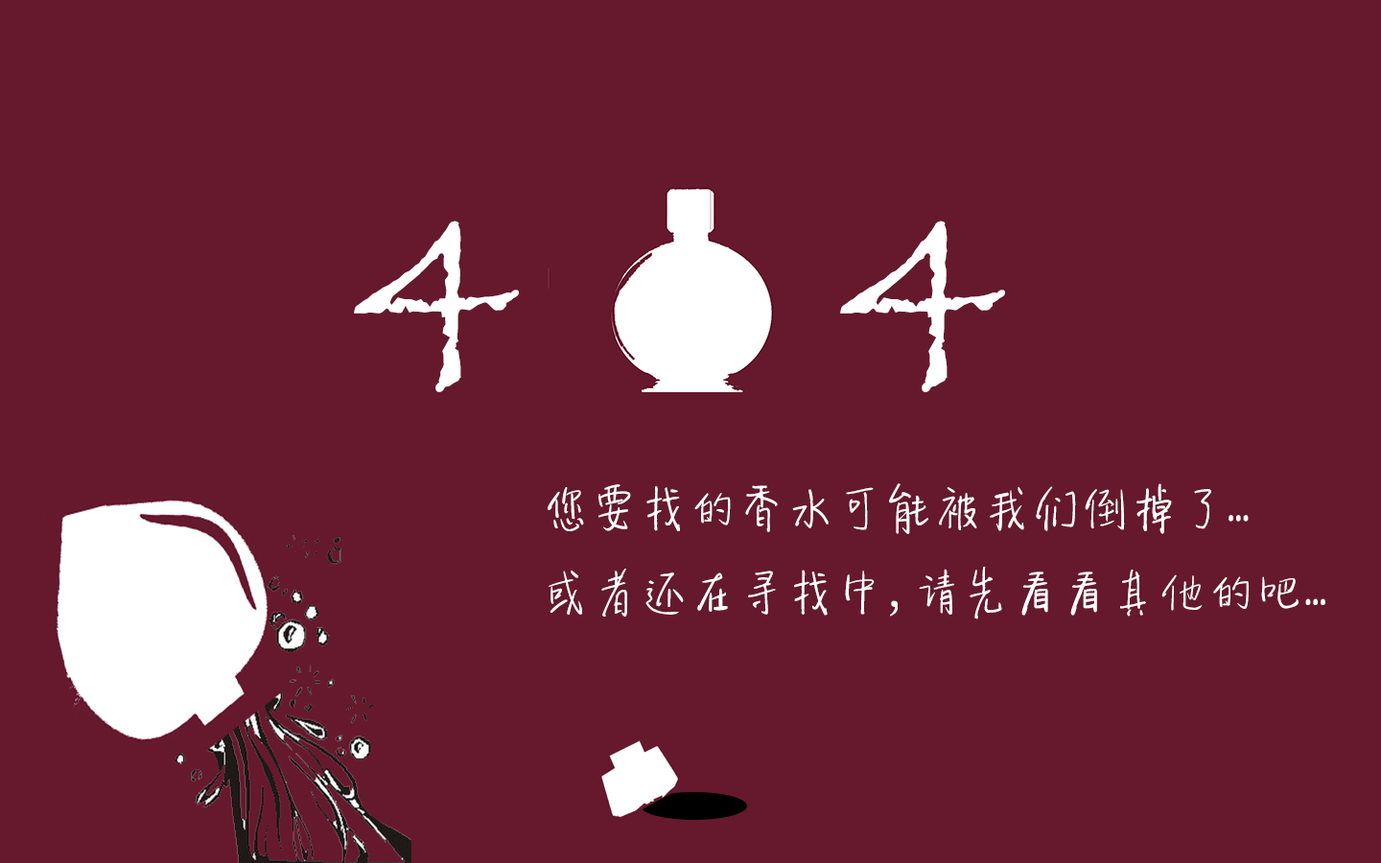
<style>
.page{position:relative;width:1381px;height:863px;background:#66192c}
.page>*{position:absolute;margin:0}
.t1{font:287.8px "Papyrus-Regular";color:#ffffff}
.t2{font:48px "SentyTEA-Platinum";color:#ffffff}
</style>
<div class="page">
<p class="t1" style="left:354px;top:221px;width:165px;height:171px">4</p>
<p class="t1" style="left:840px;top:221px;width:165px;height:171px">4</p>
<p class="t2" style="left:548px;top:483px;width:778px;height:137px">您要找的香水可能被我们倒掉了...<br>或者还在寻找中，请先看看其他的吧...</p>
</div>
